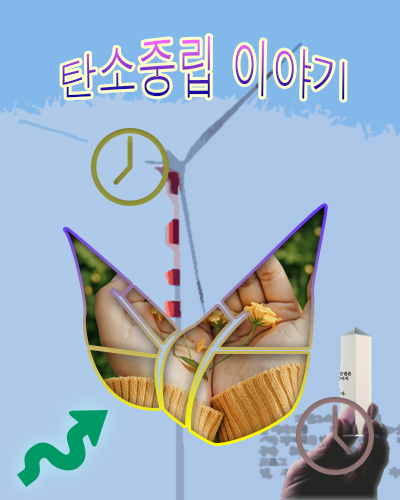
<style>
.page{position:relative;width:400px;height:500px;background:#afcae8}
.page>*{position:absolute;margin:0}
.t1{font:40px "Dotum"}
</style>
<div class="page">
<p class="t1" style="left:62px;top:36px;width:283px;height:64px">탄소중립 이야기</p>
</div>
